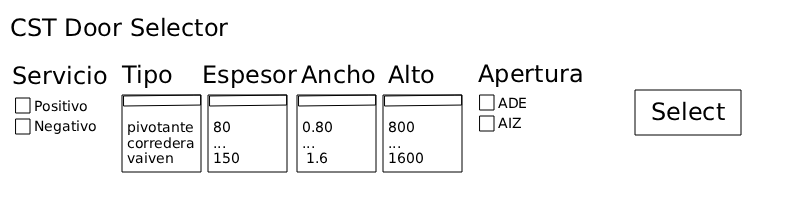
<style>
.page{position:relative;width:800px;height:203px;background:#ffffff}
.page>*{position:absolute;margin:0}
.t1{font:24px "DejaVuSans";color:#000000}
.t2{font:14px "DejaVuSans";color:#000000}
</style>
<div class="page">
<p class="t1" style="left:11px;top:17px;width:217px;height:20px">CST Door Selector</p>
<p class="t1" style="left:13px;top:65px;width:94px;height:20px">Servicio</p>
<p class="t1" style="left:121px;top:64px;width:51px;height:24px">Tipo</p>
<p class="t1" style="left:204px;top:65px;width:93px;height:23px">Espesor</p>
<p class="t1" style="left:301px;top:64px;width:74px;height:20px">Ancho</p>
<p class="t1" style="left:388px;top:64px;width:46px;height:20px">Alto</p>
<p class="t1" style="left:478px;top:64px;width:104px;height:23px">Apertura</p>
<p class="t2" style="left:35px;top:100px;width:52px;height:12px">Positivo</p>
<p class="t2" style="left:498px;top:97px;width:28px;height:11px">ADE</p>
<p class="t1" style="left:652px;top:101px;width:73px;height:20px">Select</p>
<p class="t2" style="left:35px;top:120px;width:61px;height:14px">Negativo</p>
<p class="t2" style="left:128px;top:121px;width:65px;height:14px">pivotante</p>
<p class="t2" style="left:213px;top:121px;width:17px;height:12px">80</p>
<p class="t2" style="left:302px;top:121px;width:30px;height:12px">0.80</p>
<p class="t2" style="left:388px;top:121px;width:26px;height:12px">800</p>
<p class="t2" style="left:498px;top:117px;width:23px;height:11px">AIZ</p>
<p class="t2" style="left:127px;top:137px;width:67px;height:12px">corredera</p>
<p class="t2" style="left:214px;top:146px;width:11px;height:2px">...</p>
<p class="t2" style="left:303px;top:146px;width:11px;height:2px">...</p>
<p class="t2" style="left:389px;top:146px;width:11px;height:2px">...</p>
<p class="t2" style="left:127px;top:152px;width:46px;height:12px">vaiven</p>
<p class="t2" style="left:214px;top:152px;width:25px;height:12px">150</p>
<p class="t2" style="left:307px;top:152px;width:21px;height:12px">1.6</p>
<p class="t2" style="left:389px;top:152px;width:34px;height:12px">1600</p>
</div>
